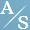
<style>
.page{position:relative;width:30px;height:30px}
.page>*{position:absolute;margin:0}
.t1{font:17.5px "CooperBT-Medium";color:#ffffff}
.t2{font:18.5px "CooperBT-Medium";color:#ffffff}
</style>
<div class="page">
<p class="t1" style="left:0px;top:1px;width:14px;height:13px">A</p>
<p class="t2" style="left:18px;top:16px;width:11px;height:13px">S</p>
</div>
